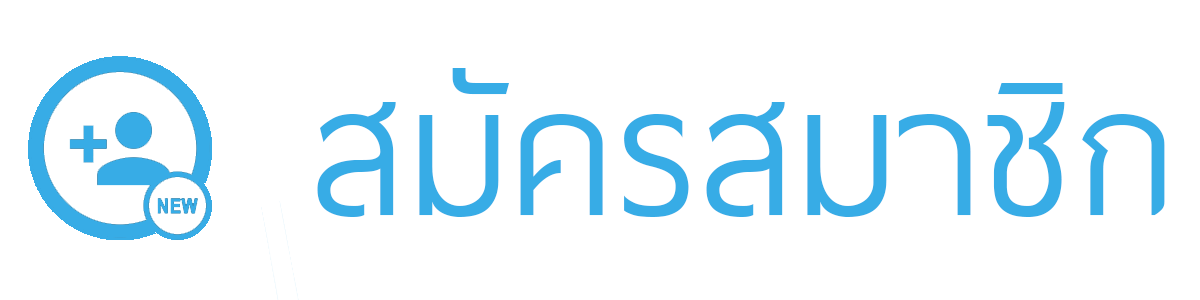
<style>
.page{position:relative;width:1200px;height:300px;background:#ffffff}
.page>*{position:absolute;margin:0}
.t1{font:230px "ThaiSansLite";color:#37ace6}
</style>
<div class="page">
<p class="t1" style="left:317px;top:68px;width:848px;height:149px">สมัครสมาชิก</p>
</div>
